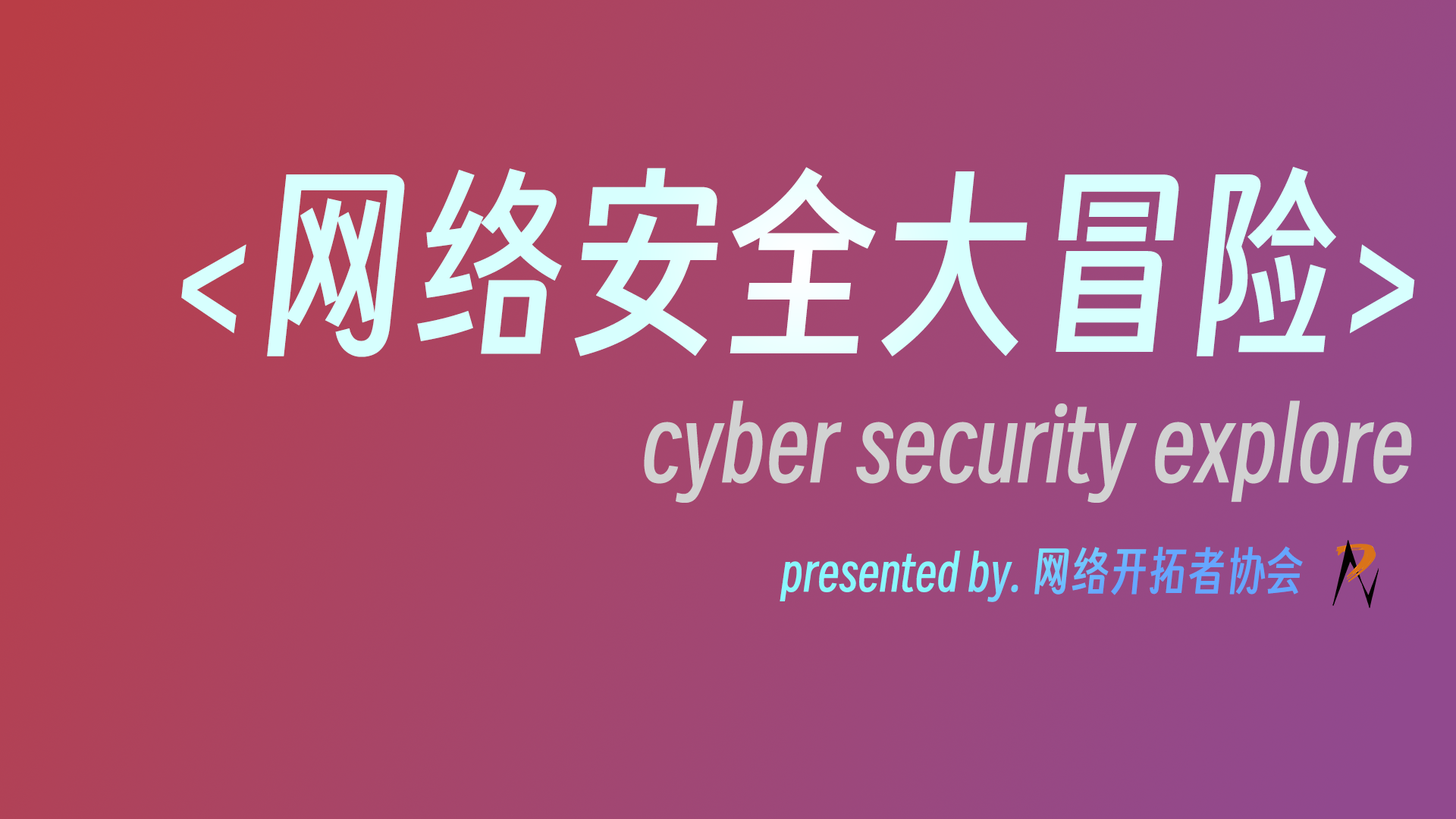
<style>
.page{position:relative;width:1456px;height:819px}
.page>*{position:absolute;margin:0}
.t1{font:194.1px "SmileySans-Oblique";color:#d7fffe}
.t2{font:97.1px "SmileySans-Oblique";color:#d2d2d2}
.t3{font:48.5px "SmileySans-Oblique"}
</style>
<div class="page">
<p class="t1" style="left:181px;top:167px;width:1234px;height:190px">&lt;网络安全大冒险&gt;</p>
<p class="t2" style="left:644px;top:400px;width:768px;height:103px">cyber security explore</p>
<p class="t3" style="left:780px;top:546px;width:523px;height:56px">presented by. 网络开拓者协会</p>
</div>
